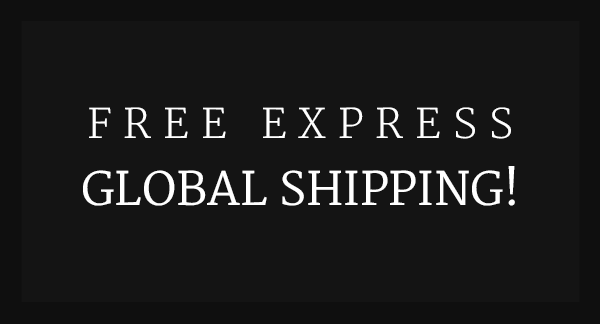
<style>
.page{position:relative;width:600px;height:324px;background:#141414}
.page>*{position:absolute;margin:0}
.t1{font:45px/67px "Merriweather";color:#ffffff}
.t2{font:40px "Merriweather-Light";letter-spacing:0.3em;color:#ffffff}
</style>
<div class="page">
<p class="t1" style="left:83px;top:107px;width:432px;height:99px;text-align:center"><span class="t2">FREE EXPRESS <br></span>GLOBAL SHIPPING!</p>
</div>
